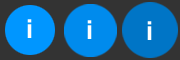
<style>
.page{position:relative;width:180px;height:60px;background:#333333}
.page>*{position:absolute;margin:0}
.t1{font:26px "Arial-BoldMT";color:#ffffff}
</style>
<div class="page">
<p class="t1" style="left:27px;top:19px;width:5px;height:19px">i</p>
<p class="t1" style="left:87px;top:20px;width:5px;height:19px">i</p>
<p class="t1" style="left:147px;top:21px;width:5px;height:19px">i</p>
</div>
